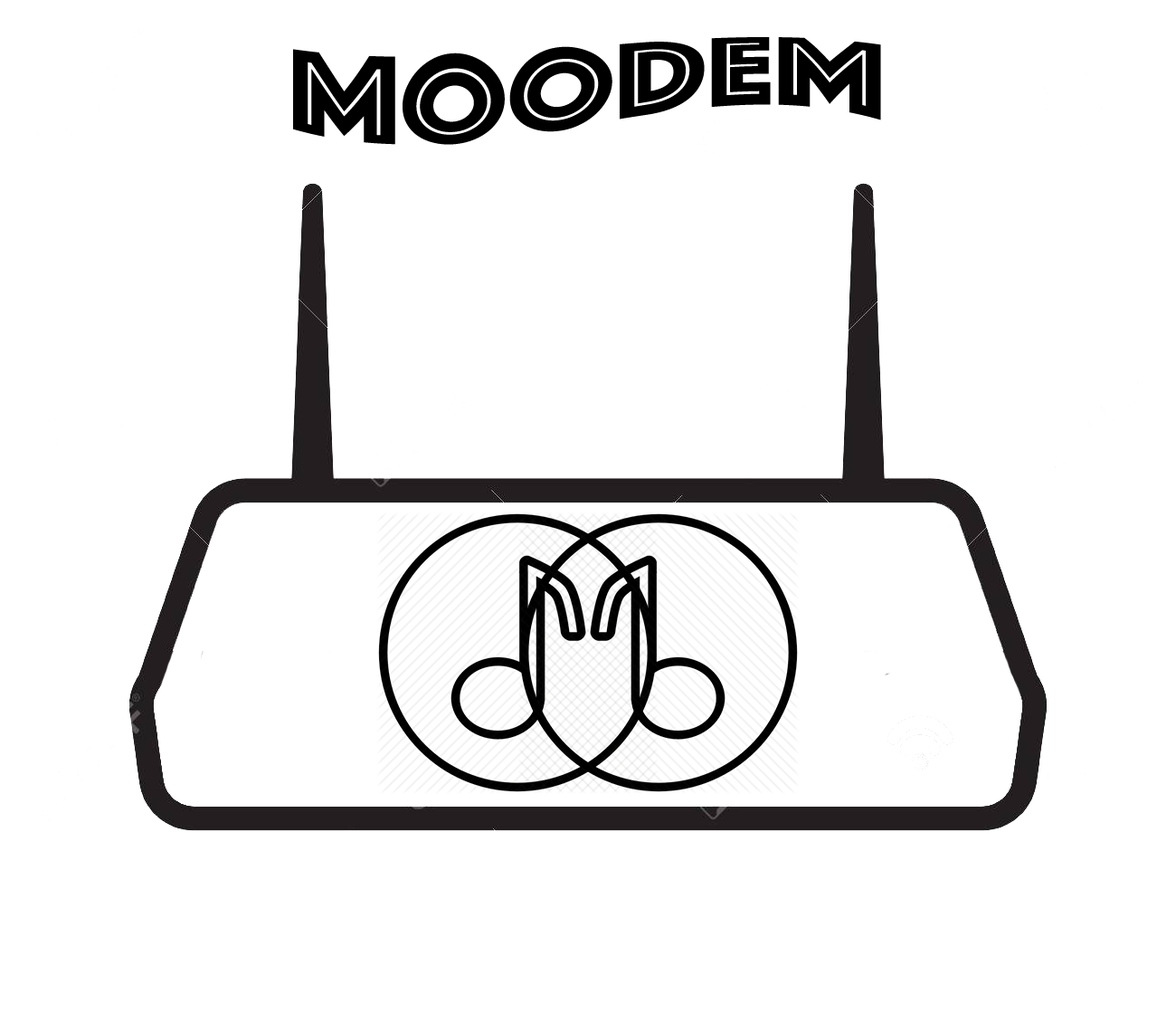
<style>
.page{position:relative;width:1176px;height:1014px;background:#ffffff}
.page>*{position:absolute;margin:0}
.t1{font:116.2px "Phosphate-Inline";color:#000000;scale:1.25 1}
</style>
<div class="page">
<p class="t1" style="left:293px;top:37px;width:588px;height:108px">MOoDem</p>
</div>
